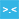
<style>
.page{position:relative;width:19px;height:19px;background:#33b5e5}
.page>*{position:absolute;margin:0}
.t1{font:10px "Arial-BoldMT";color:#ffffff}
</style>
<div class="page">
<p class="t1" style="left:2px;top:7px;width:15px;height:6px">&gt;.&lt;</p>
</div>
